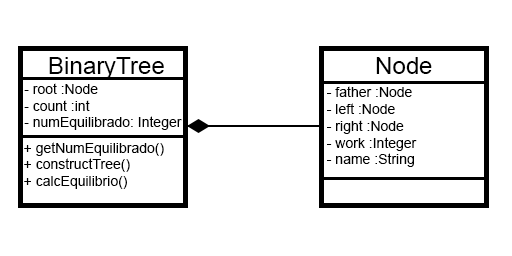
<style>
.page{position:relative;width:512px;height:256px;background:#ffffff}
.page>*{position:absolute;margin:0}
.t1{font:24px "ArialMT";color:#000000}
.t2{font:14px "ArialMT";color:#000000}
</style>
<div class="page">
<p class="t1" style="left:49px;top:57px;width:115px;height:22px">BinaryTree</p>
<p class="t1" style="left:376px;top:57px;width:56px;height:17px">Node</p>
<p class="t2" style="left:24px;top:83px;width:158px;height:47px">- root :Node<br>- count :int<br>- numEquilibrado: Integer</p>
<p class="t2" style="left:327px;top:86px;width:90px;height:81px">- father :Node<br>- left :Node<br>- right :Node<br>- work :Integer<br>- name :String</p>
<p class="t2" style="left:24px;top:142px;width:140px;height:47px">+ getNumEquilibrado()<br>+ constructTree()<br>+ calcEquilibrio()</p>
</div>
